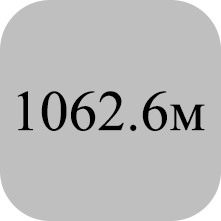
<style>
.page{position:relative;width:221px;height:221px;background:#bfbfbf}
.page>*{position:absolute;margin:0}
.t1{font:57.5px "TimesNewRomanPSMT";color:#000000}
</style>
<div class="page">
<p class="t1" style="left:17px;top:91px;width:188px;height:41px">1062.6м</p>
</div>
